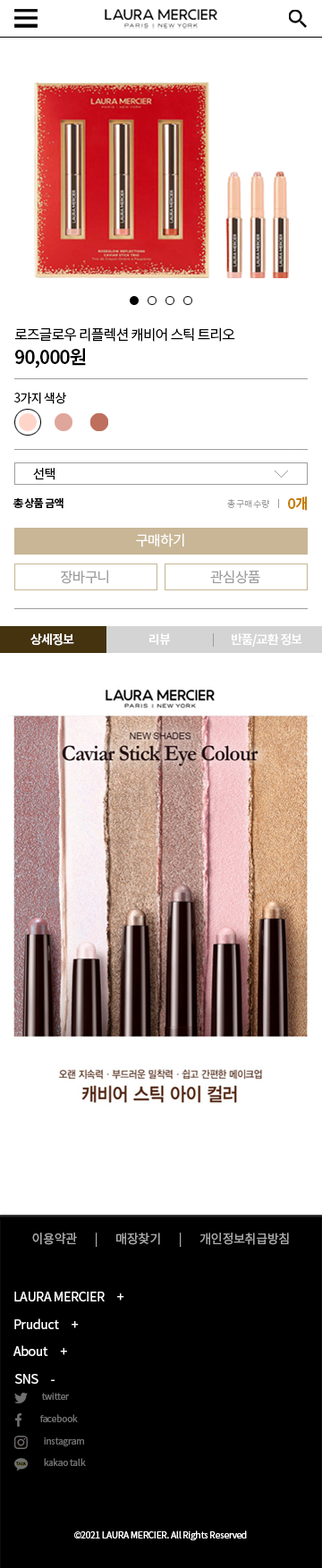
<style>
.page{position:relative;width:322px;height:1568px;background:#ffffff}
.page>*{position:absolute;margin:0}
.t1{font:14.3px "NotoSansCJKkr-Regular";letter-spacing:-0.055em;color:#000000}
.t2{font:18.8px "NotoSansCJKkr-Bold";letter-spacing:-0.055em;color:#000000}
.t3{font:12.5px "NotoSansCJKkr-Regular";letter-spacing:-0.055em;color:#000000}
.t4{font:10.7px "NotoSansCJKkr-Bold";letter-spacing:-0.055em;color:#000000}
.t5{font:14.3px "NotoSansCJKkr-Bold";letter-spacing:-0.055em;color:#c57f02}
.t6{font:8.9px "NotoSansCJKkr-Light";letter-spacing:-0.055em;color:#9e9e9e}
.t7{font:14.3px "NotoSansCJKkr-Regular";letter-spacing:-0.055em;color:#ffffff}
.t8{font:14.3px "NotoSansCJKkr-Regular";letter-spacing:-0.055em;color:#9e9e9e}
.t9{font:12.5px "NotoSansCJKkr-Bold";letter-spacing:-0.055em;color:#ffffff}
.t10{font:12.5px "NotoSansCJKkr-Regular";letter-spacing:-0.02em;color:#a8a8a8}
.t11{font:12.5px "NotoSansCJKkr-Regular";letter-spacing:-0.02em;color:#ffffff}
.t12{font:8.9px "NotoSansCJKkr-Regular";letter-spacing:-0.02em;color:#6f706f}
.t13{font:8.9px "NotoSansCJKkr-Regular";letter-spacing:-0.02em;color:#ffffff}
</style>
<div class="page">
<p class="t1" style="left:14px;top:327px;width:221px;height:15px">로즈글로우 리플렉션 캐비어 스틱 트리오</p>
<p class="t2" style="left:15px;top:348px;width:71px;height:21px">90,000원</p>
<p class="t3" style="left:14px;top:392px;width:52px;height:12px">3가지 색상</p>
<p class="t3" style="left:33px;top:468px;width:22px;height:12px">선택</p>
<p class="t4" style="left:13px;top:497px;width:51px;height:12px">총 상품 금액</p>
<p class="t5" style="left:288px;top:496px;width:20px;height:15px">0개</p>
<p class="t6" style="left:227px;top:499px;width:42px;height:10px">총 구매 수량</p>
<p class="t7" style="left:136px;top:533px;width:48px;height:14px">구매하기</p>
<p class="t8" style="left:61px;top:570px;width:47px;height:14px">장바구니</p>
<p class="t8" style="left:210px;top:570px;width:50px;height:14px">관심상품</p>
<p class="t9" style="left:30px;top:633px;width:44px;height:13px">상세정보</p>
<p class="t9" style="left:149px;top:633px;width:22px;height:12px">리뷰</p>
<p class="t9" style="left:232px;top:633px;width:70px;height:14px">반품/교환 정보</p>
<p class="t10" style="left:32px;top:1233px;width:257px;height:14px">이용약관       |       매장찾기       |       개인정보취급방침</p>
<p class="t11" style="left:14px;top:1292px;width:110px;height:9px">LAURA MERCIER     +</p>
<p class="t11" style="left:14px;top:1318px;width:65px;height:11px">Pruduct     +</p>
<p class="t11" style="left:13px;top:1345px;width:54px;height:11px">About     +</p>
<p class="t11" style="left:15px;top:1374px;width:40px;height:10px">SNS     -</p>
<p class="t12" style="left:42px;top:1393px;width:27px;height:7px">twitter</p>
<p class="t12" style="left:40px;top:1414px;width:38px;height:8px">facebook</p>
<p class="t12" style="left:44px;top:1437px;width:40px;height:9px">instagram</p>
<p class="t12" style="left:44px;top:1458px;width:42px;height:8px">kakao talk</p>
<p class="t13" style="left:74px;top:1530px;width:173px;height:10px">©2021 LAURA MERCIER. All Rights Reserved</p>
</div>
